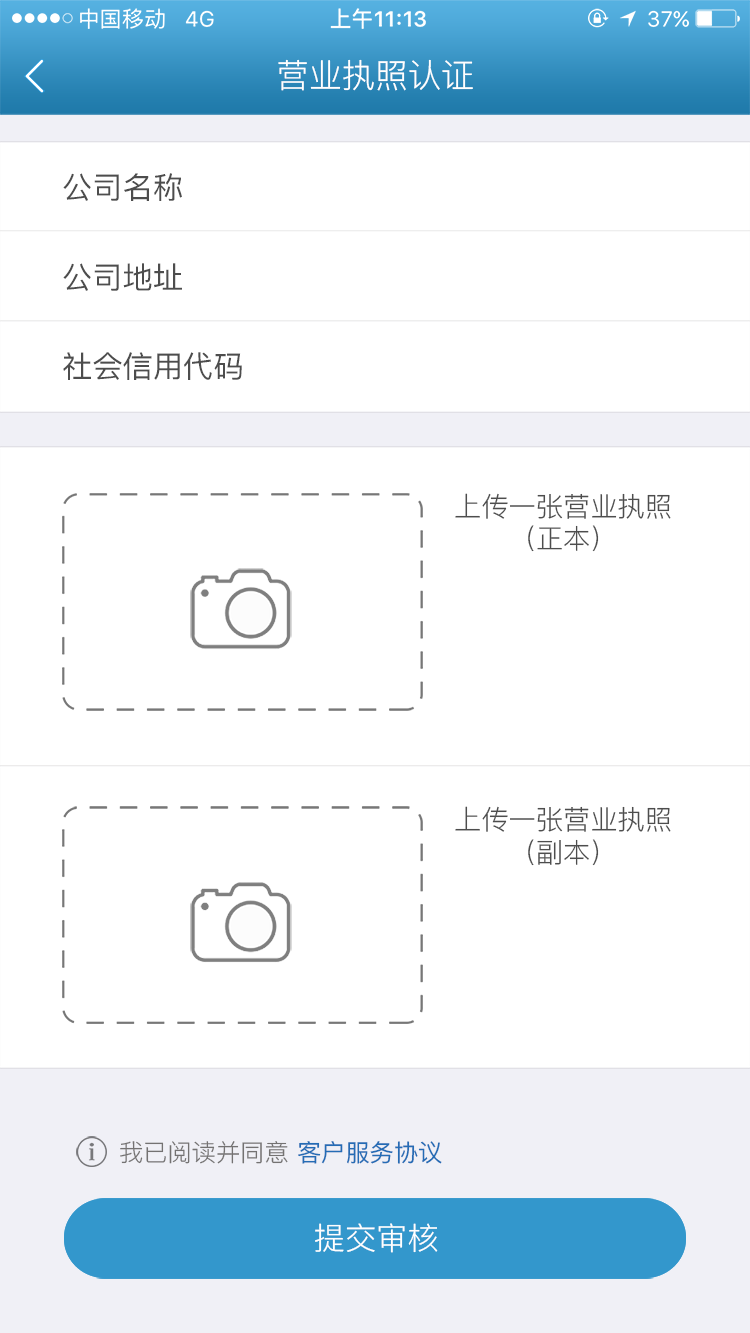
<style>
.page{position:relative;width:750px;height:1333px;background:#ffffff}
.page>*{position:absolute;margin:0}
.t1{font:33.3px "PingFang-SC-Regular";color:#ffffff}
.t2{font:30.2px "PingFang-SC-Medium";color:#4d4d4d}
.t3{font:27.2px "PingFang-SC-Regular";color:#4d4d4d}
.t4{font:24.1px "PingFang-SC-Regular";color:#747272}
.t5{font:24.1px "PingFang-SC-Medium";color:#246cb5}
.t6{font:31px "PingFang-SC-Regular";color:#ffffff}
</style>
<div class="page">
<p class="t1" style="left:278px;top:59px;width:195px;height:32px">营业执照认证</p>
<p class="t2" style="left:63px;top:173px;width:119px;height:28px">公司名称</p>
<p class="t2" style="left:63px;top:263px;width:119px;height:28px">公司地址</p>
<p class="t2" style="left:63px;top:352px;width:179px;height:28px">社会信用代码</p>
<p class="t3" style="left:455px;top:493px;width:216px;height:59px;text-align:center">上传一张营业执照<br>（正本）</p>
<p class="t3" style="left:455px;top:806px;width:216px;height:60px;text-align:center">上传一张营业执照<br>（副本）</p>
<p class="t4" style="left:120px;top:1141px;width:322px;height:23px">我已阅读并同意 <span class="t5">客户服务协议</span></p>
<p class="t6" style="left:315px;top:1223px;width:123px;height:30px">提交审核</p>
</div>
